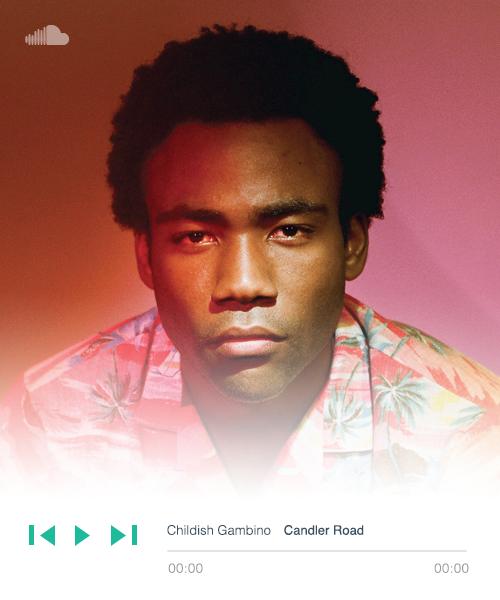
<style>
.page{position:relative;width:500px;height:600px}
.page>*{position:absolute;margin:0}
.t1{font:13px "Helvetica-Light";color:#395062}
.t2{font:13px "Helvetica";color:#395062}
.t3{font:13px "Helvetica-Light";letter-spacing:0.04em;color:#999b9b}
</style>
<div class="page">
<p class="t1" style="left:167px;top:525px;width:104px;height:10px">Childish Gambino</p>
<p class="t2" style="left:284px;top:525px;width:80px;height:10px">Candler Road</p>
<p class="t3" style="left:168px;top:563px;width:35px;height:10px">00:00</p>
<p class="t3" style="left:434px;top:563px;width:35px;height:10px">00:00</p>
</div>
